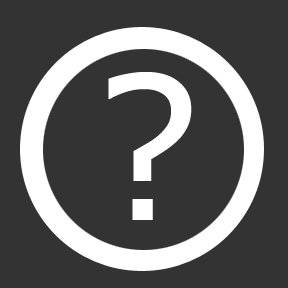
<style>
.page{position:relative;width:288px;height:288px;background:#333333}
.page>*{position:absolute;margin:0}
.t1{font:200px "Verdana";color:#ffffff}
</style>
<div class="page">
<p class="t1" style="left:108px;top:72px;width:84px;height:148px">?</p>
</div>
